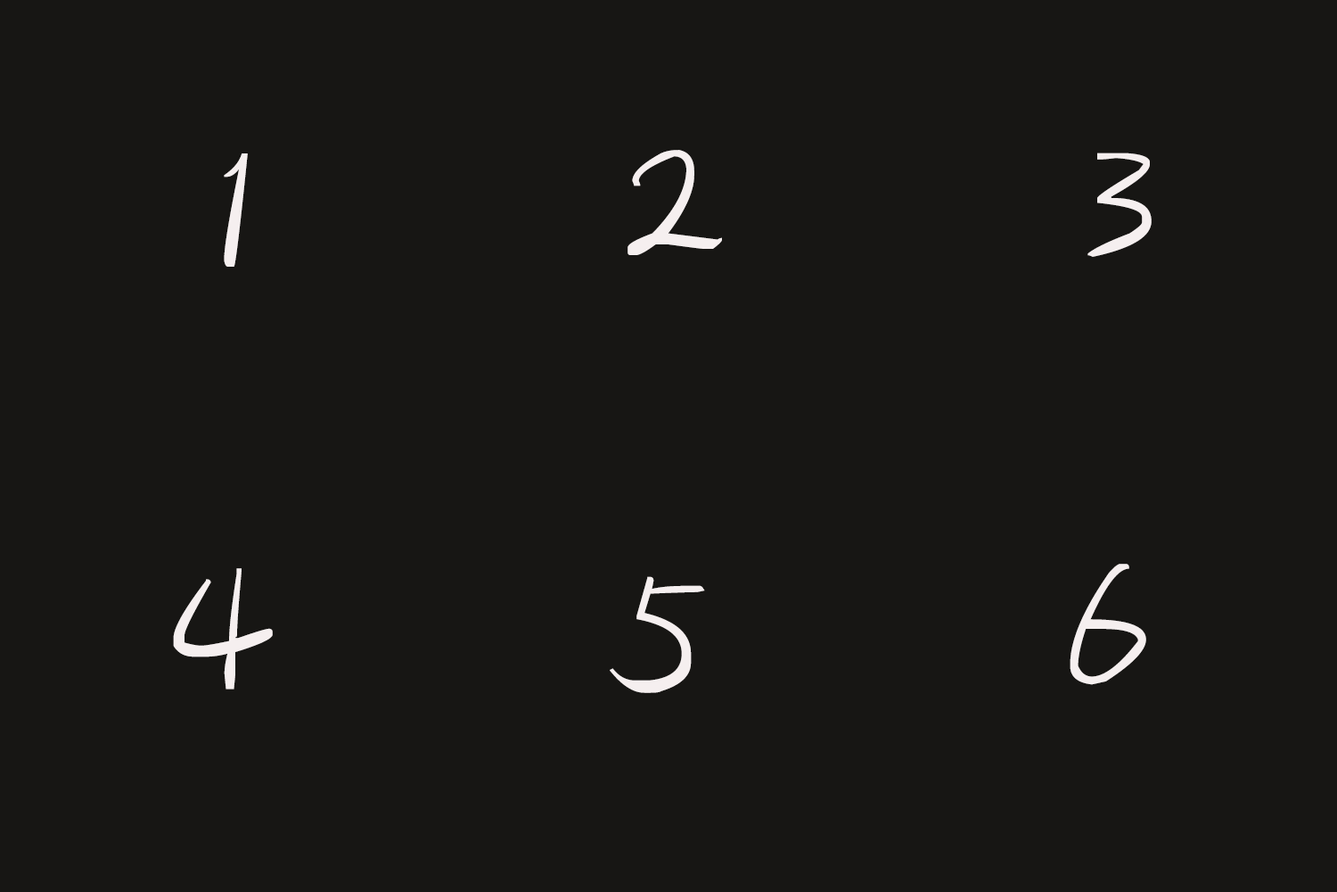
<style>
.page{position:relative;width:1337px;height:892px;background:#171614}
.page>*{position:absolute;margin:0}
.t1{font:160.5px "SentyTEA-Platinum";letter-spacing:-0.1em;color:#f5efef}
</style>
<div class="page">
<p class="t1" style="left:628px;top:150px;width:94px;height:105px">2</p>
<p class="t1" style="left:224px;top:153px;width:24px;height:114px">1</p>
<p class="t1" style="left:1088px;top:152px;width:64px;height:105px">3</p>
<p class="t1" style="left:173px;top:568px;width:100px;height:121px">4</p>
<p class="t1" style="left:1070px;top:563px;width:77px;height:122px">6</p>
<p class="t1" style="left:610px;top:576px;width:95px;height:117px">5</p>
</div>
